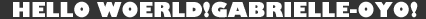
<style>
.page{position:relative;width:426px;height:19px;background:#333333}
.page>*{position:absolute;margin:0}
.t1{font:20px "GillSans-UltraBold";color:#ffffff}
</style>
<div class="page">
<p class="t1" style="left:13px;top:1px;width:405px;height:17px">HELLO WOERLD!GABRIELLE-OYO!</p>
</div>
